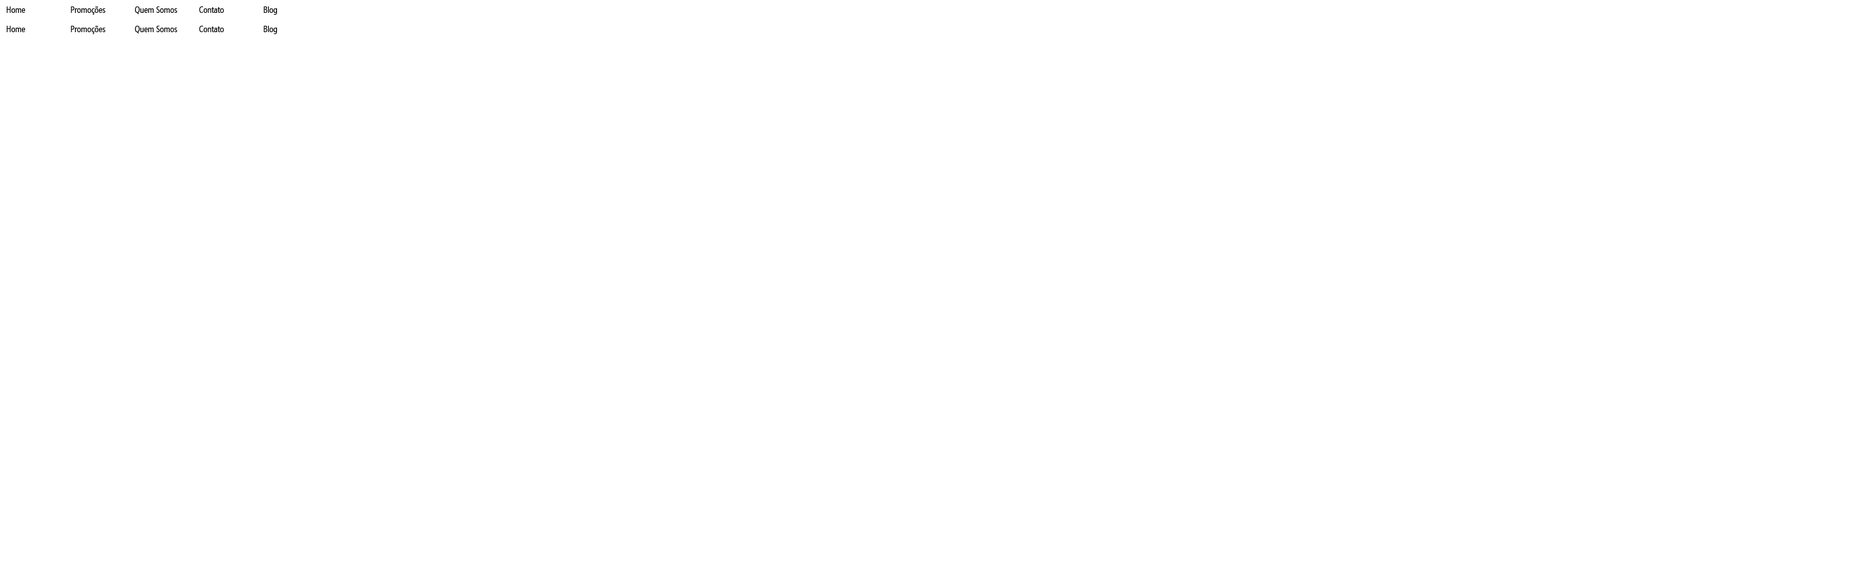
<style>
.page{position:relative;width:1851px;height:579px;background:#ffffff}
.page>*{position:absolute;margin:0}
.t1{font:9px "SegoeCondensed";color:#000000}
</style>
<div class="page">
<p class="t1" style="left:6px;top:6px;width:19px;height:7px">Home</p>
<p class="t1" style="left:71px;top:6px;width:34px;height:9px">Promoções</p>
<p class="t1" style="left:135px;top:6px;width:42px;height:8px">Quem Somos</p>
<p class="t1" style="left:199px;top:6px;width:25px;height:7px">Contato</p>
<p class="t1" style="left:264px;top:6px;width:13px;height:9px">Blog</p>
<p class="t1" style="left:6px;top:26px;width:19px;height:6px">Home</p>
<p class="t1" style="left:71px;top:26px;width:34px;height:8px">Promoções</p>
<p class="t1" style="left:135px;top:26px;width:42px;height:7px">Quem Somos</p>
<p class="t1" style="left:199px;top:26px;width:25px;height:6px">Contato</p>
<p class="t1" style="left:264px;top:26px;width:13px;height:8px">Blog</p>
</div>
